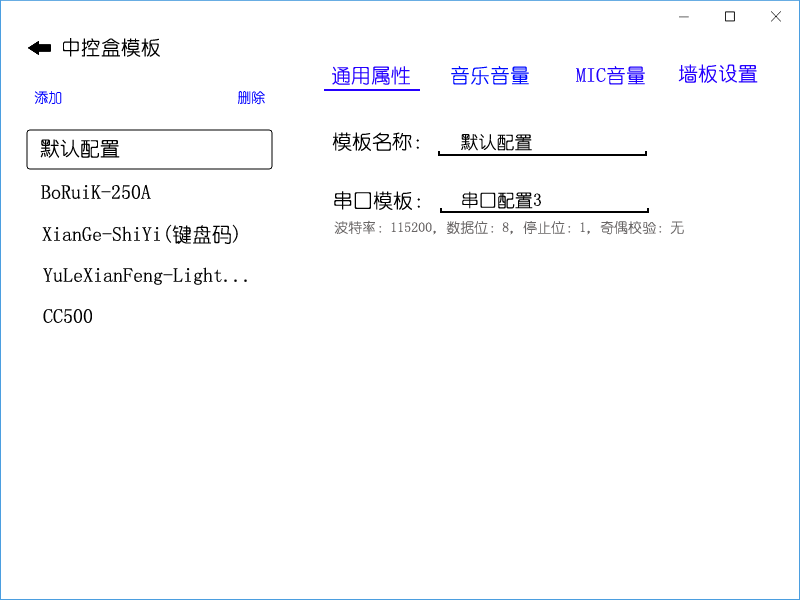
<style>
.page{position:relative;width:800px;height:600px;background:#ffffff}
.page>*{position:absolute;margin:0}
.t1{font:20px "YouYuan";color:#010101}
.t2{font:20px "YouYuan";color:#2501ff}
.t3{font:20px "YouYuan";color:#000cff}
.t4{font:20px "YouYuan";color:#1f01fd}
.t5{font:14px "YouYuan";color:#0000fe}
.t6{font:18px "YouYuan";color:#010101}
.t7{font:14px "YouYuan";color:#696666}
</style>
<div class="page">
<p class="t1" style="left:63px;top:38px;width:97px;height:19px">中控盒模板</p>
<p class="t2" style="left:678px;top:64px;width:80px;height:19px">墙板设置</p>
<p class="t2" style="left:332px;top:66px;width:78px;height:19px">通用属性</p>
<p class="t3" style="left:451px;top:66px;width:78px;height:19px">音乐音量</p>
<p class="t4" style="left:576px;top:66px;width:69px;height:19px">MIC音量</p>
<p class="t5" style="left:34px;top:91px;width:28px;height:13px">添加</p>
<p class="t5" style="left:238px;top:91px;width:27px;height:14px">删除</p>
<p class="t1" style="left:332px;top:132px;width:87px;height:19px">模板名称：</p>
<p class="t6" style="left:461px;top:134px;width:71px;height:17px">默认配置</p>
<p class="t1" style="left:40px;top:139px;width:80px;height:19px">默认配置</p>
<p class="t1" style="left:41px;top:184px;width:110px;height:15px">BoRuiK-250A</p>
<p class="t1" style="left:334px;top:191px;width:86px;height:19px">串口模板：</p>
<p class="t6" style="left:462px;top:191px;width:79px;height:18px">串口配置3</p>
<p class="t7" style="left:334px;top:220px;width:350px;height:15px">波特率：115200，数据位：8，停止位：1，奇偶校验：无</p>
<p class="t1" style="left:42px;top:224px;width:196px;height:20px">XianGe-ShiYi(键盘码)</p>
<p class="t1" style="left:43px;top:267px;width:204px;height:18px">YuLeXianFeng-Light...</p>
<p class="t1" style="left:43px;top:309px;width:49px;height:14px">CC500</p>
</div>
